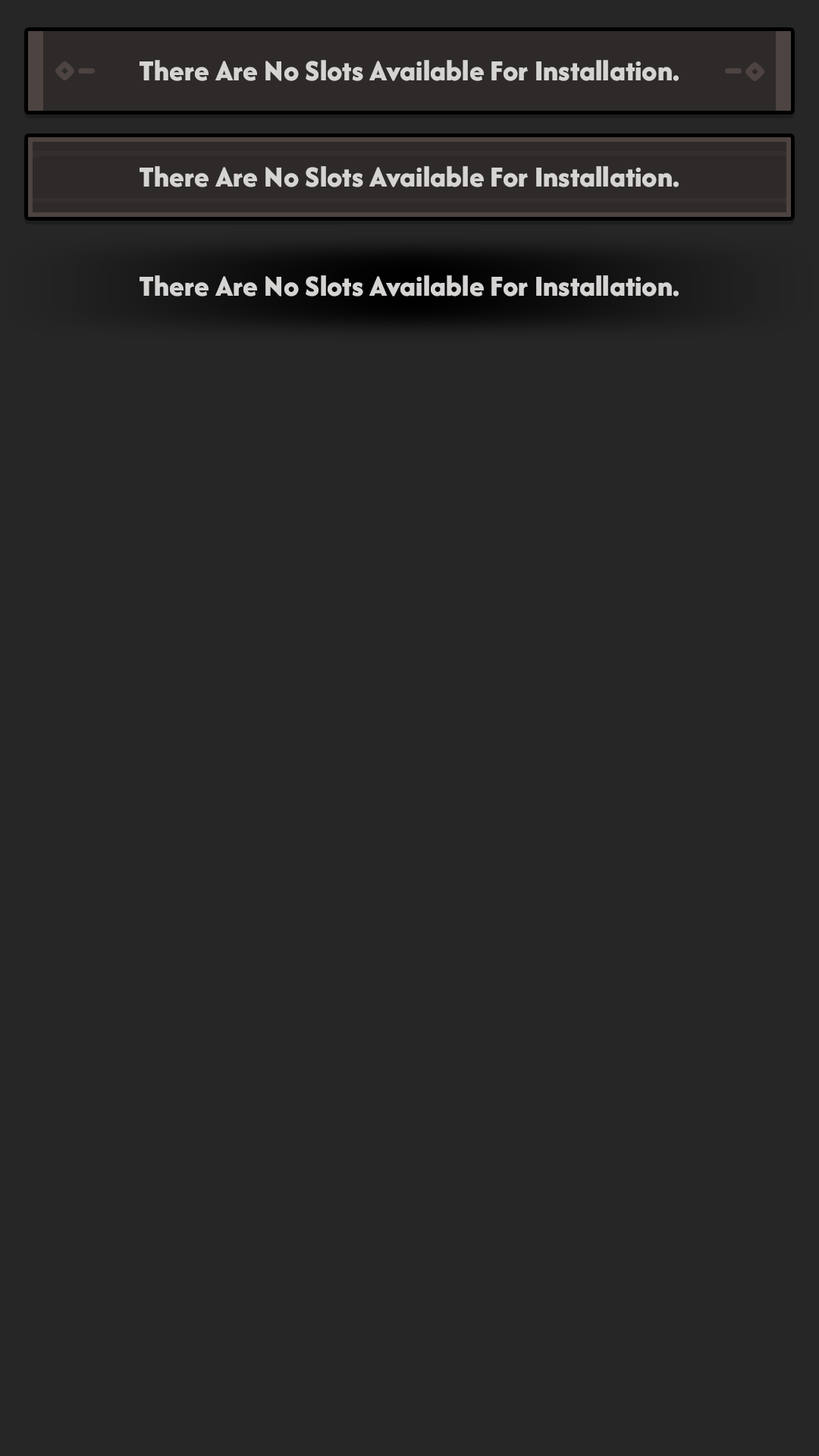
<style>
.page{position:relative;width:819px;height:1456px;background:#262626}
.page>*{position:absolute;margin:0}
.t1{font:30.3px "AfacadFlux-ExtraBold";color:#d6d4d3}
</style>
<div class="page">
<p class="t1" style="left:140px;top:60px;width:539px;height:21px">There Are No Slots Available For Installation.</p>
<p class="t1" style="left:140px;top:166px;width:539px;height:21px">There Are No Slots Available For Installation.</p>
<p class="t1" style="left:140px;top:275px;width:539px;height:22px">There Are No Slots Available For Installation.</p>
</div>
